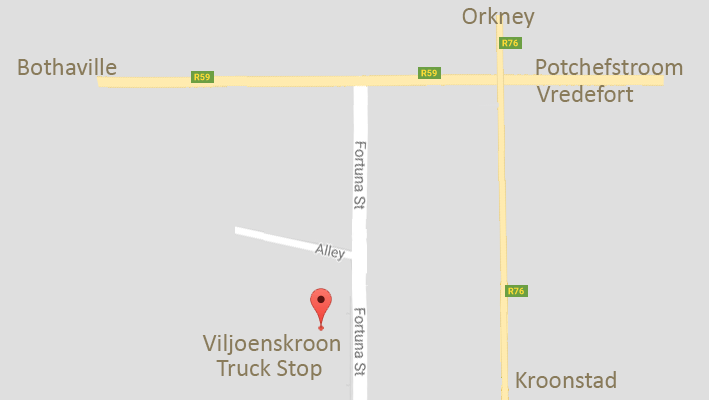
<style>
.page{position:relative;width:709px;height:400px;background:#dfdfdf}
.page>*{position:absolute;margin:0}
.t1{font:25px "Calibri";color:#897b5a}
</style>
<div class="page">
<p class="t1" style="left:462px;top:7px;width:73px;height:21px">Orkney</p>
<p class="t1" style="left:18px;top:58px;width:99px;height:17px">Bothaville</p>
<p class="t1" style="left:536px;top:58px;width:147px;height:17px">Potchefstroom</p>
<p class="t1" style="left:536px;top:85px;width:98px;height:17px">Vredefort</p>
<p class="t1" style="left:202px;top:334px;width:138px;height:21px">Viljoenskroon</p>
<p class="t1" style="left:216px;top:359px;width:106px;height:21px">Truck Stop</p>
<p class="t1" style="left:516px;top:371px;width:100px;height:17px">Kroonstad</p>
</div>
